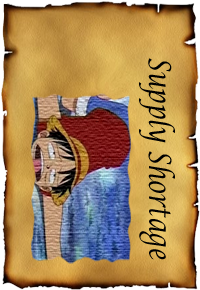
<style>
.page{position:relative;width:200px;height:290px}
.page>*{position:absolute;margin:0}
.t1{font:30.5px "LucidaCalligraphy-Italic";color:#000000;scale:0.77 1}
</style>
<div class="page">
<p class="t1" style="left:139px;top:58px;width:36px;height:202px;rotate:90deg">Supply Shortage</p>
</div>
